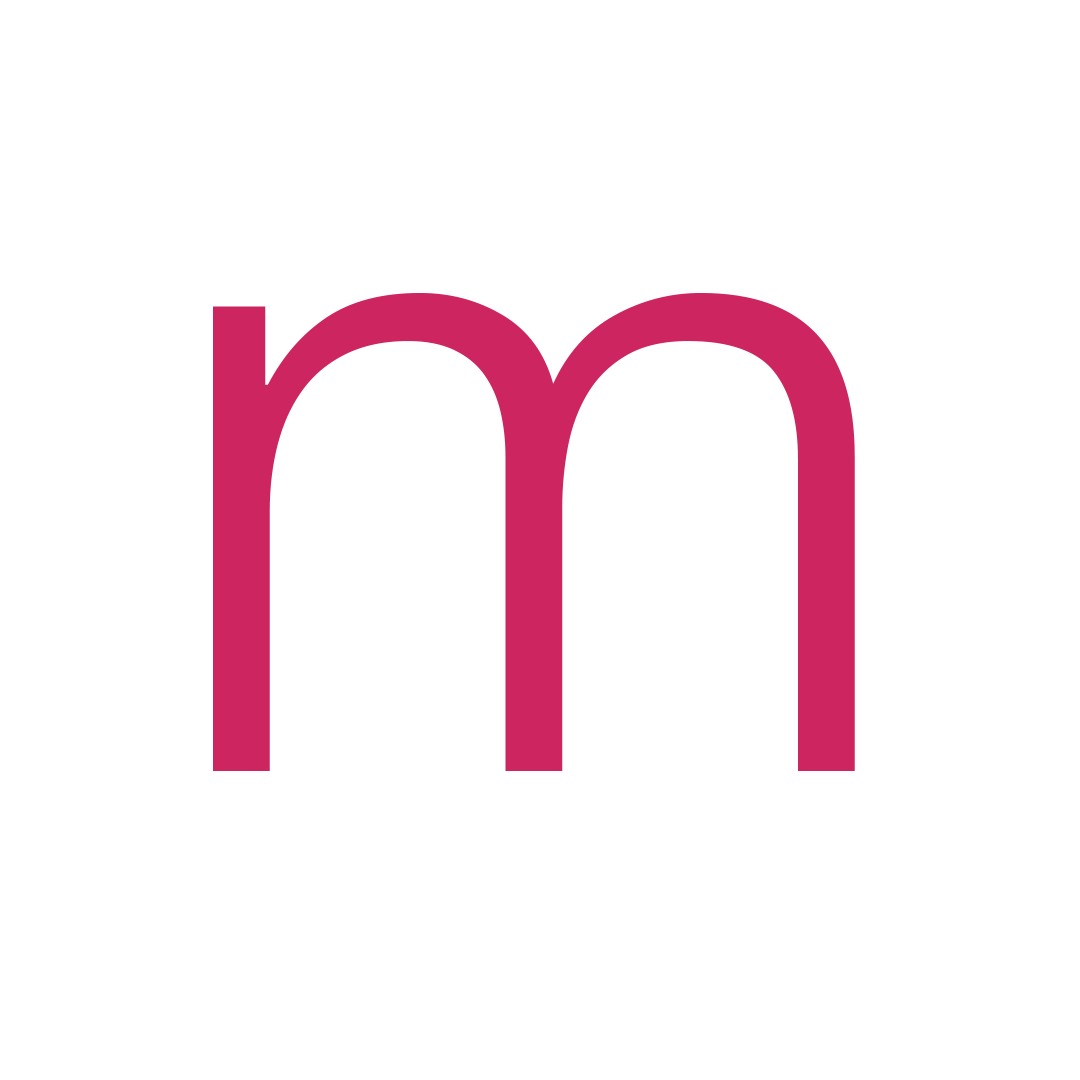
<style>
.page{position:relative;width:1080px;height:1080px;background:#ffffff}
.page>*{position:absolute;margin:0}
.t1{font:900px "HelveticaNeue-Light";color:#cc255f}
</style>
<div class="page">
<p class="t1" style="left:213px;top:293px;width:642px;height:478px">m</p>
</div>
